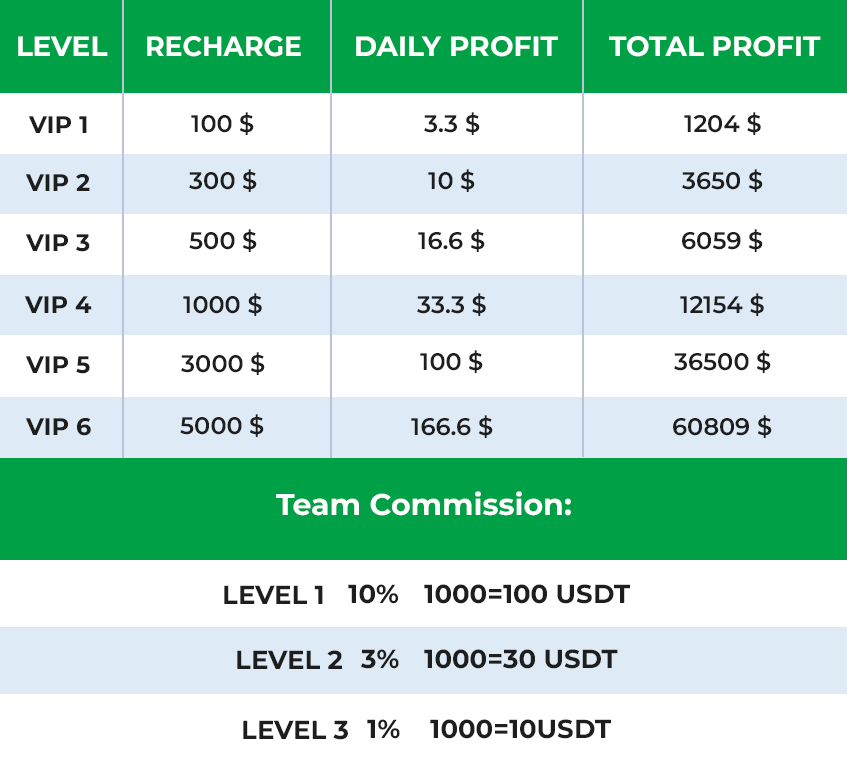
<style>
.page{position:relative;width:847px;height:763px;background:#ffffff}
.page>*{position:absolute;margin:0}
.t1{font:28px "Montserrat-Bold";color:#ffffff}
.t2{font:28px "Montserrat-Bold";color:#ffffff;scale:0.95 1}
.t3{font:24px "Montserrat-SemiBold";color:#1e1e1e}
.t4{font:24px "Montserrat-Bold";color:#1e1e1e}
.t5{font:30px "Montserrat-Bold";color:#ffffff}
.t6{font:26px "Montserrat-Bold";color:#1e1e1e}
</style>
<div class="page">
<p class="t1" style="left:18px;top:36px;width:90px;height:20px">LEVEL</p>
<p class="t2" style="left:147px;top:36px;width:154px;height:21px">RECHARGE</p>
<p class="t1" style="left:356px;top:36px;width:202px;height:21px">DAILY PROFIT</p>
<p class="t1" style="left:609px;top:36px;width:212px;height:21px">TOTAL PROFIT</p>
<p class="t3" style="left:191px;top:112px;width:63px;height:23px">100 $</p>
<p class="t3" style="left:424px;top:112px;width:56px;height:23px">3.3 $</p>
<p class="t3" style="left:684px;top:112px;width:77px;height:23px">1204 $</p>
<p class="t4" style="left:28px;top:116px;width:59px;height:17px">VIP 1</p>
<p class="t4" style="left:25px;top:174px;width:65px;height:17px">VIP 2</p>
<p class="t3" style="left:189px;top:169px;width:68px;height:23px">300 $</p>
<p class="t3" style="left:428px;top:169px;width:47px;height:23px">10 $</p>
<p class="t3" style="left:682px;top:169px;width:81px;height:23px">3650 $</p>
<p class="t3" style="left:189px;top:229px;width:68px;height:23px">500 $</p>
<p class="t3" style="left:418px;top:229px;width:67px;height:23px">16.6 $</p>
<p class="t3" style="left:682px;top:229px;width:81px;height:23px">6059 $</p>
<p class="t4" style="left:25px;top:234px;width:65px;height:18px">VIP 3</p>
<p class="t3" style="left:183px;top:293px;width:79px;height:23px">1000 $</p>
<p class="t3" style="left:417px;top:293px;width:69px;height:23px">33.3 $</p>
<p class="t3" style="left:680px;top:293px;width:84px;height:23px">12154 $</p>
<p class="t4" style="left:24px;top:296px;width:68px;height:17px">VIP 4</p>
<p class="t3" style="left:181px;top:352px;width:84px;height:23px">3000 $</p>
<p class="t3" style="left:420px;top:350px;width:63px;height:23px">100 $</p>
<p class="t3" style="left:674px;top:350px;width:97px;height:23px">36500 $</p>
<p class="t4" style="left:25px;top:356px;width:65px;height:18px">VIP 5</p>
<p class="t3" style="left:180px;top:414px;width:84px;height:23px">5000 $</p>
<p class="t4" style="left:25px;top:418px;width:66px;height:18px">VIP 6</p>
<p class="t3" style="left:411px;top:415px;width:82px;height:23px">166.6 $</p>
<p class="t3" style="left:673px;top:415px;width:99px;height:23px">60809 $</p>
<p class="t5" style="left:276px;top:491px;width:295px;height:25px">Team Commission:</p>
<p class="t6" style="left:224px;top:585px;width:99px;height:19px">LEVEL 1</p>
<p class="t6" style="left:348px;top:584px;width:50px;height:20px">10%</p>
<p class="t6" style="left:424px;top:584px;width:206px;height:20px">1000=100 USDT</p>
<p class="t6" style="left:237px;top:650px;width:105px;height:19px">LEVEL 2</p>
<p class="t6" style="left:361px;top:649px;width:38px;height:20px">3%</p>
<p class="t6" style="left:424px;top:649px;width:194px;height:20px">1000=30 USDT</p>
<p class="t6" style="left:243px;top:720px;width:105px;height:20px">LEVEL 3</p>
<p class="t6" style="left:367px;top:719px;width:33px;height:20px">1%</p>
<p class="t6" style="left:430px;top:719px;width:181px;height:20px">1000=10USDT</p>
</div>
